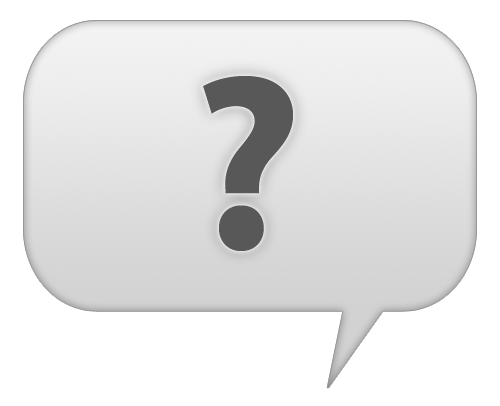
<style>
.page{position:relative;width:500px;height:406px;background:#ffffff}
.page>*{position:absolute;margin:0}
.t1{font:250px "MyriadPro-Bold";color:#585858}
</style>
<div class="page">
<p class="t1" style="left:203px;top:76px;width:90px;height:175px">?</p>
</div>
